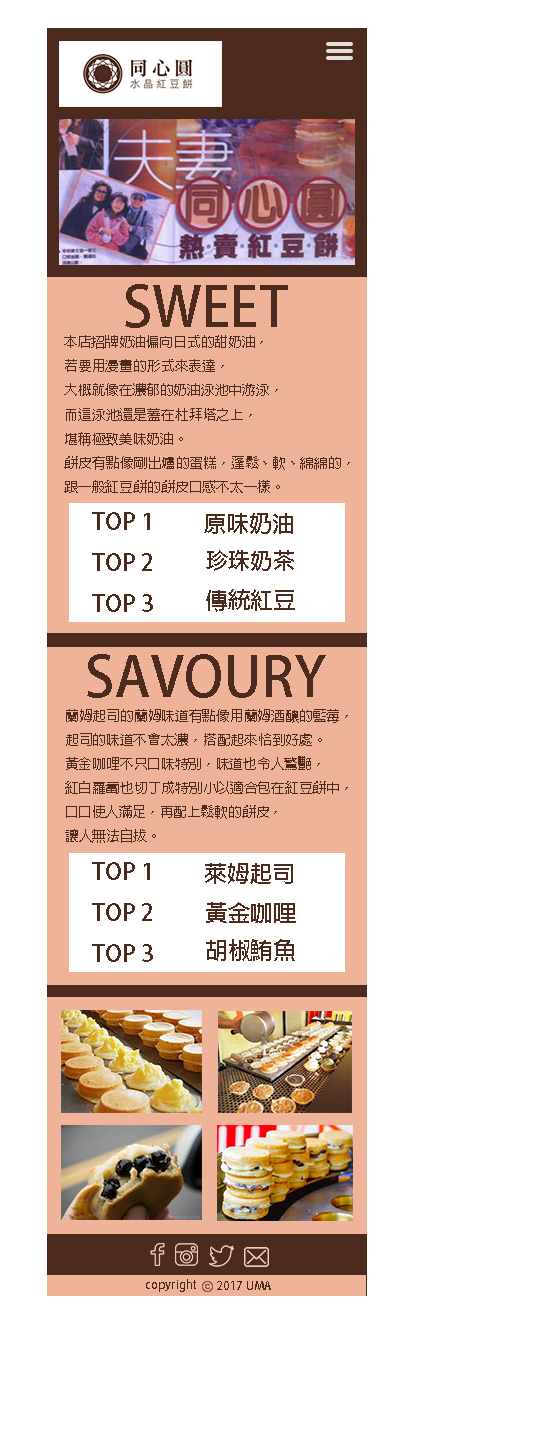
<style>
.page{position:relative;width:544px;height:1444px;background:#ffffff}
.page>*{position:absolute;margin:0}
.t1{font:54.4px "AdobeFanHeitiStd-Bold";color:#4c2a1e}
.t2{font:13.8px "AdobeFanHeitiStd-Bold";color:#4c2a1e}
.t3{font:23.4px "AdobeFanHeitiStd-Bold";color:#4c2a1e}
.t4{font:22.7px "AdobeFanHeitiStd-Bold";color:#4c2a1e}
.t5{font:22.5px "AdobeFanHeitiStd-Bold";color:#4c2a1e}
.t6{font:23.2px "AdobeFanHeitiStd-Bold";color:#4c2a1e}
.t7{font:11.7px "AdobeFanHeitiStd-Bold";color:#4c2a1e}
</style>
<div class="page">
<p class="t1" style="left:125px;top:284px;width:163px;height:44px">SWEET</p>
<p class="t2" style="left:64px;top:335px;width:286px;height:158px">本店招牌奶油偏向日式的甜奶油，<br>若要用漫畫的形式來表達，<br>大概就像在濃郁的奶油泳池中游泳，<br>而這泳池還是蓋在杜拜塔之上，<br>堪稱極致美味奶油。<br>餅皮有點像剛出爐的蛋糕，蓬鬆、軟、綿綿的，<br>跟一般紅豆餅的餅皮口感不太一樣。</p>
<p class="t3" style="left:92px;top:512px;width:61px;height:100px">TOP 1<br>TOP 2<br>TOP 3</p>
<p class="t4" style="left:204px;top:513px;width:89px;height:21px">原味奶油</p>
<p class="t5" style="left:206px;top:550px;width:88px;height:21px">珍珠奶茶</p>
<p class="t6" style="left:206px;top:589px;width:89px;height:23px">傳統紅豆</p>
<p class="t1" style="left:87px;top:654px;width:239px;height:44px">SAVOURY</p>
<p class="t2" style="left:65px;top:709px;width:283px;height:134px">蘭姆起司的蘭姆味道有點像用蘭姆酒釀的藍莓，<br>起司的味道不會太濃，搭配起來恰到好處。<br>黃金咖哩不只口味特別，味道也令人驚艷，<br>紅白蘿蔔也切丁成特別小以適合包在紅豆餅中，<br>口口使人滿足，再配上鬆軟的餅皮，<br>讓人無法自拔。</p>
<p class="t3" style="left:92px;top:862px;width:61px;height:100px">TOP 1<br>TOP 2<br>TOP 3</p>
<p class="t4" style="left:205px;top:863px;width:88px;height:21px">萊姆起司</p>
<p class="t6" style="left:206px;top:902px;width:90px;height:21px">黃金咖哩</p>
<p class="t6" style="left:206px;top:939px;width:89px;height:22px">胡椒鮪魚</p>
<p class="t7" style="left:146px;top:1279px;width:50px;height:13px">copyright</p>
<p class="t7" style="left:217px;top:1281px;width:54px;height:9px">2017 UMA</p>
</div>
